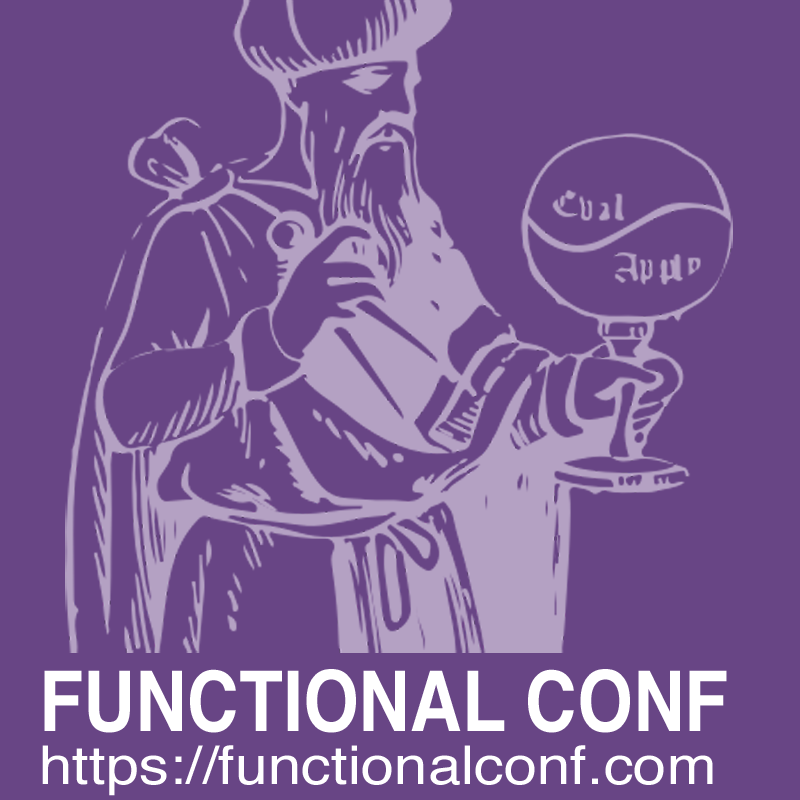
<style>
.page{position:relative;width:800px;height:800px;background:#684585}
.page>*{position:absolute;margin:0}
.t1{font:53.3px/53.3px "Helvetica";color:#ffffff;scale:1.12 1}
.t2{font:83.6px "Helvetica-Bold";color:#ffffff;scale:0.86 1}
</style>
<div class="page">
<p class="t1" style="left:42px;top:669px;width:685px;height:127px"><span class="t2">FUNCTIONAL CONF<br></span>https://functionalconf.com</p>
</div>
